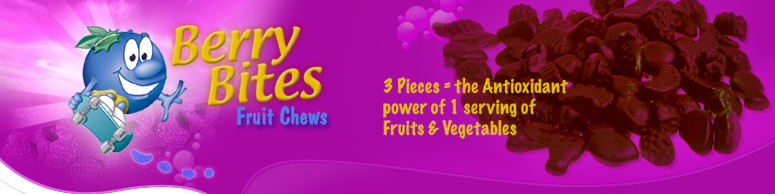
<style>
.page{position:relative;width:775px;height:194px}
.page>*{position:absolute;margin:0}
.t1{font:17.5px "MarkerFelt-Thin";color:#eabd00}
.t2{font:25px "Domkrat";color:#5080ea}
</style>
<div class="page">
<p class="t1" style="left:383px;top:77px;width:185px;height:62px">3 Pieces = the Antioxidant <br>power of 1 serving of <br>Fruits &amp; Vegetables</p>
<p class="t2" style="left:237px;top:106px;width:90px;height:19px">Fruit Chews</p>
</div>
